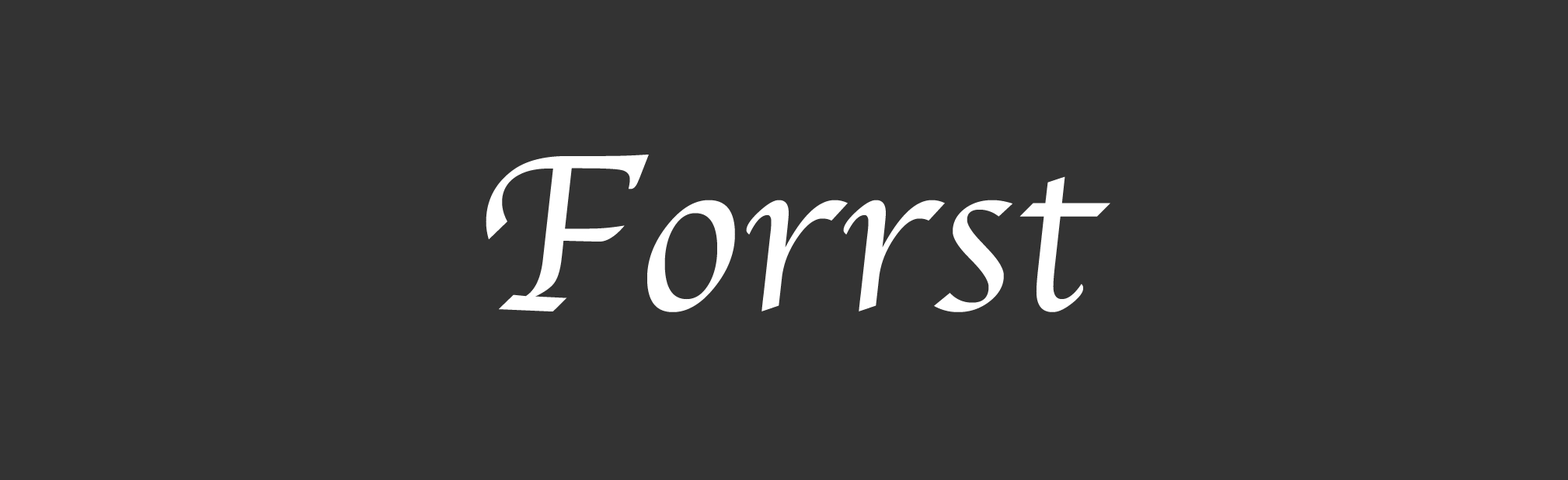
<style>
.page{position:relative;width:1568px;height:480px;background:#333333}
.page>*{position:absolute;margin:0}
.t1{font:233.1px "Apple-Chancery";color:#ffffff}
</style>
<div class="page">
<p class="t1" style="left:486px;top:155px;width:624px;height:157px">Forrst</p>
</div>
